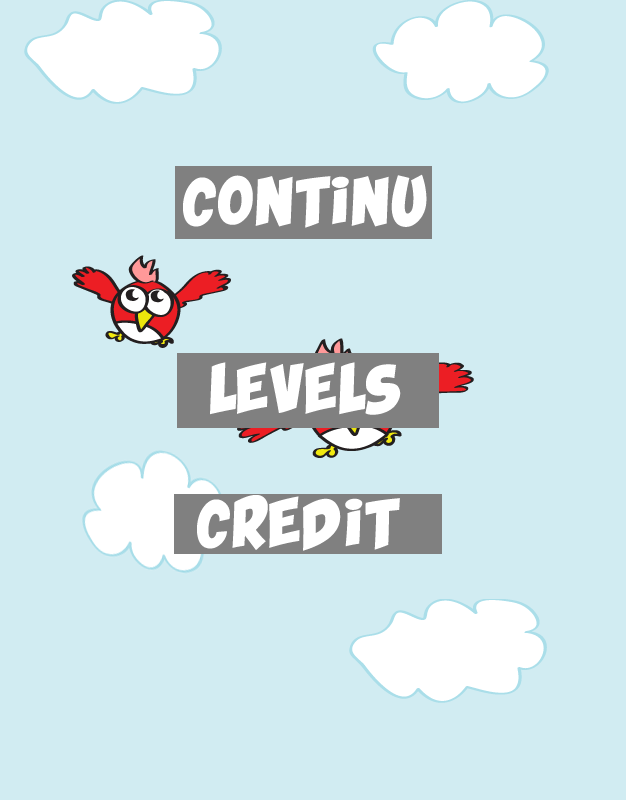
<style>
.page{position:relative;width:626px;height:800px;background:#d1ecf2}
.page>*{position:absolute;margin:0}
.t1{font:60px "KaBlam";letter-spacing:0.1em;color:#ffffff}
</style>
<div class="page">
<p class="t1" style="left:183px;top:174px;width:244px;height:54px">CONTINU</p>
<p class="t1" style="left:210px;top:362px;width:191px;height:53px">LEVELS</p>
<p class="t1" style="left:197px;top:495px;width:203px;height:56px">CREDIT</p>
</div>
